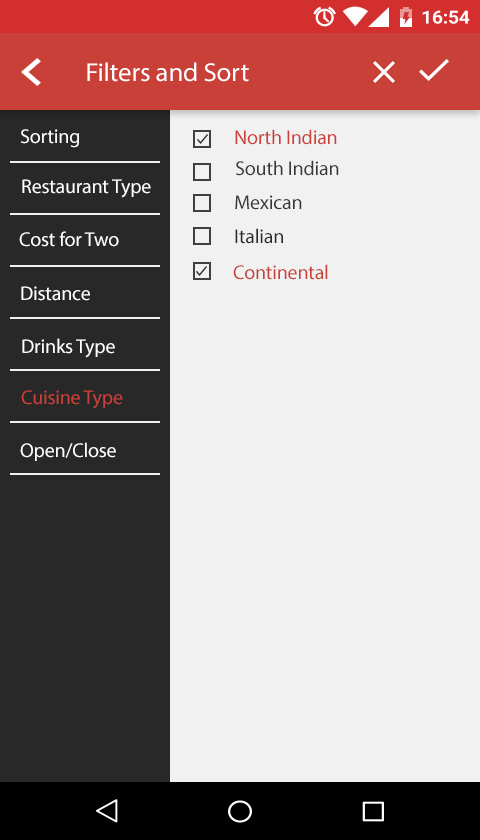
<style>
.page{position:relative;width:480px;height:840px;background:#f1f1f1}
.page>*{position:absolute;margin:0}
.t1{font:26.1px "MyriadPro-Regular";letter-spacing:-0.01em;color:#ffffff;scale:1.03 1}
.t2{font:20px "MyriadPro-Regular";letter-spacing:-0.01em;color:#fefefe}
.t3{font:20px "MyriadPro-Regular";letter-spacing:-0.01em;color:#c94038}
.t4{font:20px "MyriadPro-Regular";letter-spacing:-0.01em;color:#373737}
.t5{font:20px "MyriadPro-Regular";letter-spacing:-0.01em;color:#ffffff}
.t6{font:20px "MyriadPro-Regular";letter-spacing:-0.01em;color:#282828}
</style>
<div class="page">
<p class="t1" style="left:87px;top:62px;width:162px;height:20px">Filters and Sort</p>
<p class="t2" style="left:21px;top:129px;width:58px;height:19px">Sorting</p>
<p class="t3" style="left:235px;top:129px;width:102px;height:16px">North Indian</p>
<p class="t4" style="left:236px;top:160px;width:103px;height:16px">South Indian</p>
<p class="t5" style="left:22px;top:179px;width:129px;height:19px">Restaurant Type</p>
<p class="t4" style="left:235px;top:195px;width:67px;height:15px">Mexican</p>
<p class="t5" style="left:19px;top:231px;width:100px;height:16px">Cost for Two</p>
<p class="t6" style="left:235px;top:228px;width:48px;height:16px">Italian</p>
<p class="t3" style="left:233px;top:264px;width:95px;height:16px">Continental</p>
<p class="t5" style="left:21px;top:286px;width:69px;height:15px">Distance</p>
<p class="t5" style="left:22px;top:338px;width:93px;height:20px">Drinks Type</p>
<p class="t3" style="left:21px;top:390px;width:102px;height:19px">Cuisine Type</p>
<p class="t5" style="left:20px;top:442px;width:96px;height:19px">Open/Close</p>
</div>
